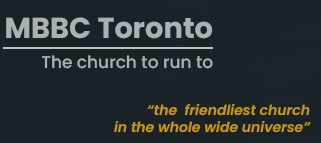
<style>
.page{position:relative;width:321px;height:143px;background:#182227}
.page>*{position:absolute;margin:0}
.t1{font:28.8px "Poppins-Bold";color:#aab0b3}
.t2{font:17px "Poppins-Medium";color:#aab0b3}
.t3{font:14px "Poppins-SemiBoldItalic";color:#ca970e}
</style>
<div class="page">
<p class="t1" style="left:6px;top:17px;width:206px;height:22px">MBBC Toronto</p>
<p class="t2" style="left:42px;top:55px;width:171px;height:14px">The church to run to</p>
<p class="t3" style="left:114px;top:103px;width:197px;height:30px;text-align:right">“the  friendliest church<br>in the whole wide universe”</p>
</div>
